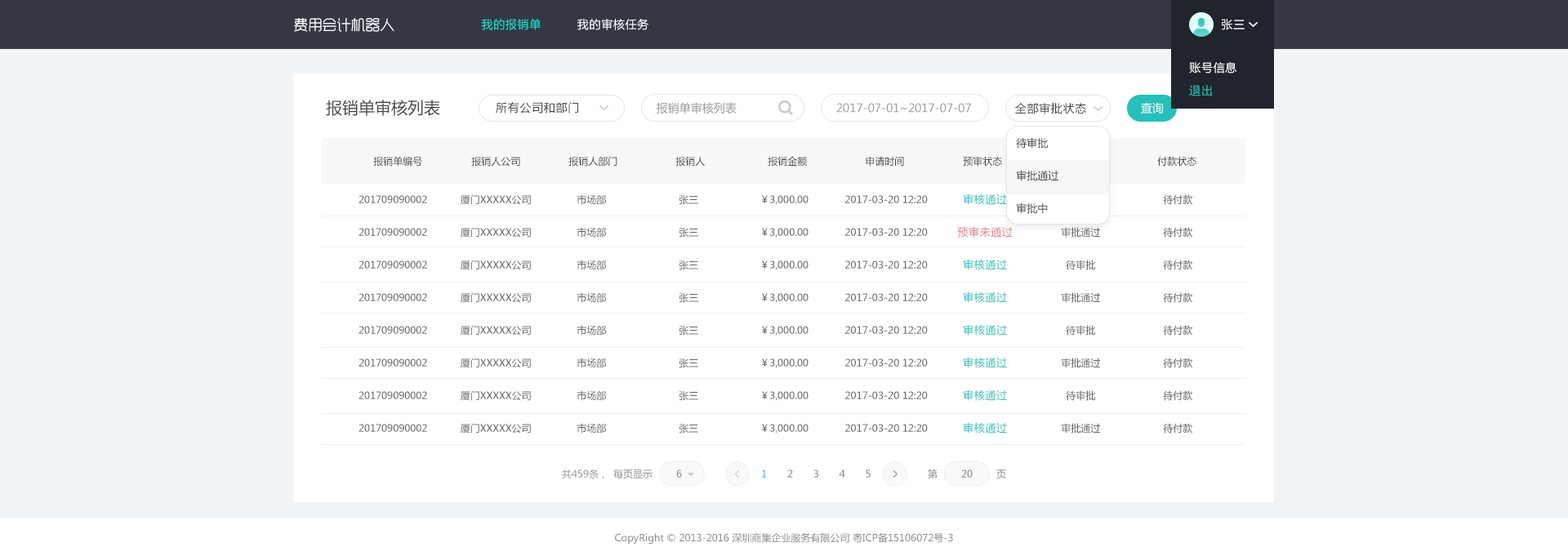
<style>
.page{position:relative;width:1568px;height:556px;background:#ffffff}
.page>*{position:absolute;margin:0}
.t1{font:14.5px "RTWSYueGoDemo-Regular";letter-spacing:-0.04em;color:#ffffff;text-transform:uppercase;scale:1.04 1}
.t2{font:11.4px "MicrosoftYaHei";letter-spacing:0.05em;color:#18dfd3}
.t3{font:11.4px "MicrosoftYaHei";letter-spacing:0.05em;color:#ffffff}
.t4{font:11.4px/22.9px "MicrosoftYaHei";letter-spacing:0.05em;color:#ffffff}
.t5{font:11.4px/22.9px "MicrosoftYaHei";letter-spacing:0.05em;color:#24c0b9}
.t6{font:16.3px "MicrosoftYaHei";color:#444444}
.t7{font:11.4px "MicrosoftYaHei";letter-spacing:0.05em;color:#444444}
.t8{font:11.4px "MicrosoftYaHei";color:#999999}
.t9{font:11.4px "MicrosoftYaHei";color:#ffffff}
.t10{font:10.6px/32.7px "MicrosoftYaHei";color:#444444}
.t11{font:9.8px "MicrosoftYaHei";color:#474747}
.t12{font:9.8px/32.7px "MicrosoftYaHei";color:#666666}
.t13{font:10.6px/32.7px "MicrosoftYaHei";letter-spacing:0.05em;color:#24c0b9}
.t14{font:10.6px/32.7px "MicrosoftYaHei";letter-spacing:0.05em;color:#e77e7e}
.t15{font:9.8px "MicrosoftYaHei";color:#999999}
.t16{font:9.8px "MicrosoftYaHei";color:#898989}
.t17{font:9.8px "MicrosoftYaHei";color:#24c0b9}
</style>
<div class="page">
<p class="t1" style="left:294px;top:18px;width:100px;height:14px">费用会计机器人</p>
<p class="t2" style="left:481px;top:19px;width:60px;height:11px">我的报销单</p>
<p class="t3" style="left:577px;top:19px;width:71px;height:11px">我的审核任务</p>
<p class="t3" style="left:1222px;top:19px;width:23px;height:11px">张三</p>
<p class="t4" style="left:1189px;top:62px;width:48px;height:34px">账号信息<br><span class="t5">退出</span></p>
<p class="t6" style="left:326px;top:100px;width:114px;height:16px">报销单审核列表</p>
<p class="t7" style="left:496px;top:102px;width:82px;height:12px">所有公司和部门</p>
<p class="t8" style="left:657px;top:102px;width:80px;height:12px">报销单审核列表</p>
<p class="t8" style="left:836px;top:103px;width:135px;height:10px">2017-07-01~2017-07-07</p>
<p class="t7" style="left:1015px;top:103px;width:71px;height:11px">全部审批状态</p>
<p class="t9" style="left:1141px;top:102px;width:22px;height:12px">查询</p>
<p class="t10" style="left:1016px;top:137px;width:42px;height:77px">待审批<br>审批通过<br>审批中</p>
<p class="t11" style="left:373px;top:156px;width:49px;height:11px">报销单编号</p>
<p class="t11" style="left:471px;top:156px;width:49px;height:11px">报销人公司</p>
<p class="t11" style="left:568px;top:156px;width:49px;height:11px">报销人部门</p>
<p class="t11" style="left:675px;top:156px;width:30px;height:11px">报销人</p>
<p class="t11" style="left:768px;top:156px;width:39px;height:11px">报销金额</p>
<p class="t11" style="left:866px;top:156px;width:38px;height:11px">申请时间</p>
<p class="t11" style="left:963px;top:156px;width:39px;height:11px">预审状态</p>
<p class="t11" style="left:1157px;top:156px;width:39px;height:11px">付款状态</p>
<p class="t12" style="left:359px;top:195px;width:68px;height:237px;text-align:center">201709090002<br>201709090002<br>201709090002<br>201709090002<br>201709090002<br>201709090002<br>201709090002<br>201709090002</p>
<p class="t12" style="left:461px;top:194px;width:70px;height:240px;text-align:center">厦门XXXXX公司<br>厦门XXXXX公司<br>厦门XXXXX公司<br>厦门XXXXX公司<br>厦门XXXXX公司<br>厦门XXXXX公司<br>厦门XXXXX公司<br>厦门XXXXX公司</p>
<p class="t12" style="left:577px;top:194px;width:29px;height:240px;text-align:center">市场部<br>市场部<br>市场部<br>市场部<br>市场部<br>市场部<br>市场部<br>市场部</p>
<p class="t12" style="left:679px;top:195px;width:19px;height:239px;text-align:center">张三<br>张三<br>张三<br>张三<br>张三<br>张三<br>张三<br>张三</p>
<p class="t12" style="left:762px;top:195px;width:46px;height:239px;text-align:center">￥3,000.00<br>￥3,000.00<br>￥3,000.00<br>￥3,000.00<br>￥3,000.00<br>￥3,000.00<br>￥3,000.00<br>￥3,000.00</p>
<p class="t12" style="left:845px;top:195px;width:83px;height:237px;text-align:center">2017-03-20 12:20<br>2017-03-20 12:20<br>2017-03-20 12:20<br>2017-03-20 12:20<br>2017-03-20 12:20<br>2017-03-20 12:20<br>2017-03-20 12:20<br>2017-03-20 12:20</p>
<p class="t13" style="left:957px;top:194px;width:56px;height:240px;text-align:center">审核通过<br><span class="t14">预审未通过<br></span>审核通过<br>审核通过<br>审核通过<br>审核通过<br>审核通过<br>审核通过</p>
<p class="t12" style="left:1062px;top:194px;width:38px;height:240px;text-align:center">待审批<br>审批通过<br>待审批<br>审批通过<br>待审批<br>审批通过<br>待审批<br>审批通过</p>
<p class="t12" style="left:1163px;top:194px;width:29px;height:240px;text-align:center">待付款<br>待付款<br>待付款<br>待付款<br>待付款<br>待付款<br>待付款<br>待付款</p>
<p class="t15" style="left:562px;top:469px;width:42px;height:10px">共459条，</p>
<p class="t16" style="left:613px;top:469px;width:40px;height:10px">每页显示</p>
<p class="t16" style="left:676px;top:470px;width:6px;height:8px">6</p>
<p class="t16" style="left:762px;top:470px;width:109px;height:8px"><span class="t17">1  </span>     2       3       4       5</p>
<p class="t16" style="left:928px;top:469px;width:10px;height:10px">第</p>
<p class="t16" style="left:961px;top:470px;width:12px;height:8px">20</p>
<p class="t16" style="left:996px;top:470px;width:10px;height:9px">页</p>
<p class="t16" style="left:615px;top:533px;width:338px;height:11px">CopyRight © 2013-2016 深圳商集企业服务有限公司 粤ICP备15106072号-3</p>
</div>
